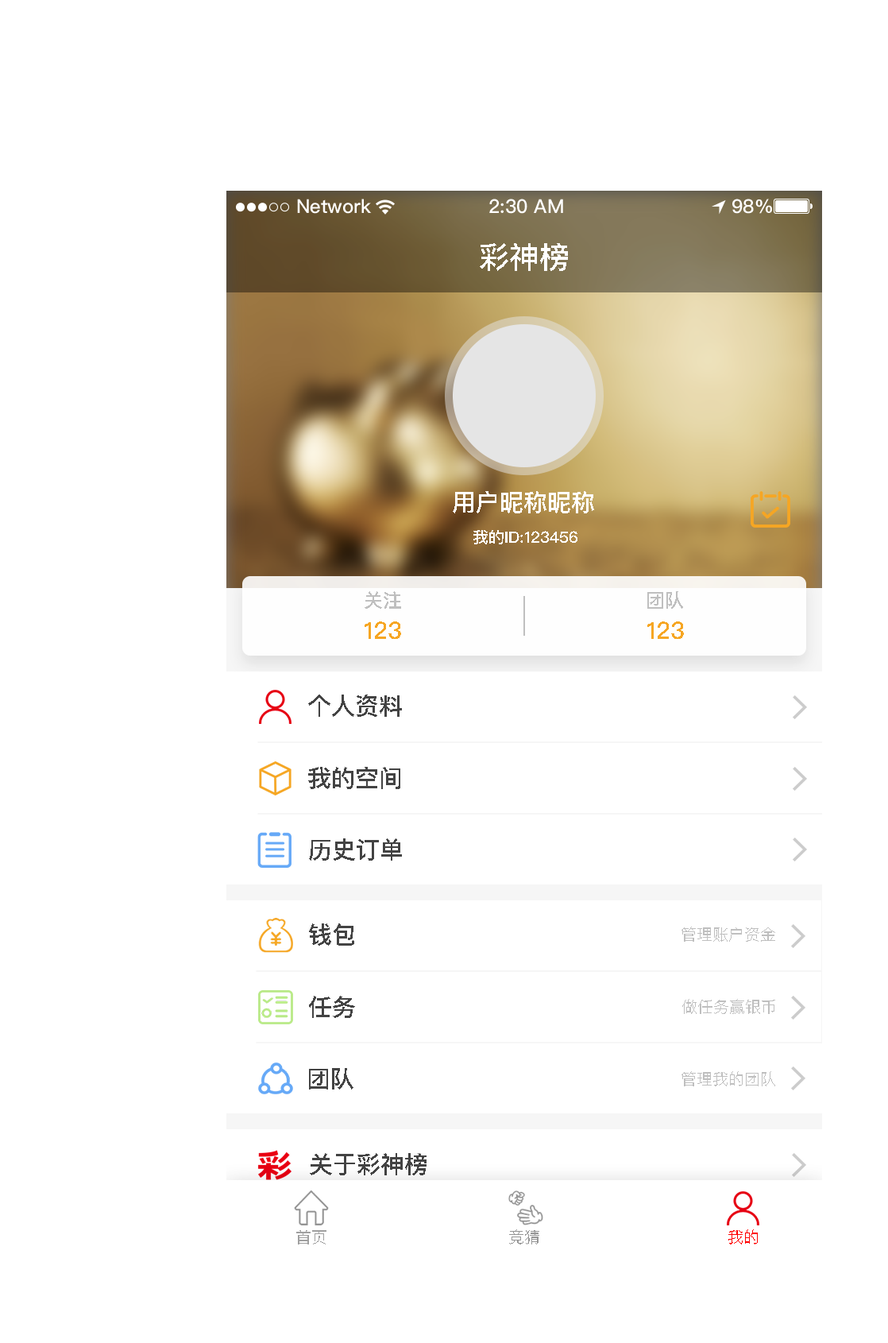
<style>
.page{position:relative;width:888px;height:1343px;background:#ffffff}
.page>*{position:absolute;margin:0}
.t1{font:30.2px "PingFangSC-Medium";color:#ffffff;text-transform:uppercase}
.t2{font:23.8px "PingFangSC-Medium";color:#ffffff;text-transform:uppercase}
.t3{font:15.9px "PingFangSC-Medium";color:#ffffff;text-transform:uppercase}
.t4{font:19.1px "PingFangSC-Medium";color:#bfbfbf;text-transform:uppercase}
.t5{font:23.8px "PingFangSC-Medium";color:#f6a623;text-transform:uppercase}
.t6{font:23.8px "PingFangSC-Medium";color:#434343;text-transform:uppercase}
.t7{font:15.9px "PingFangSC-Regular";color:#bfbfbf;text-transform:uppercase}
.t8{font:15.9px "PingFangSC-Regular";color:#a0a0a0;text-transform:uppercase}
.t9{font:15.9px "PingFangSC-Regular";color:#959595;text-transform:uppercase}
.t10{font:15.9px "PingFangSC-Regular";color:#ff0000;text-transform:uppercase}
</style>
<div class="page">
<p class="t1" style="left:480px;top:243px;width:88px;height:28px">彩神榜</p>
<p class="t2" style="left:453px;top:491px;width:141px;height:22px">用户昵称昵称</p>
<p class="t3" style="left:473px;top:530px;width:105px;height:14px">我的id:123456</p>
<p class="t4" style="left:365px;top:591px;width:36px;height:18px">关注</p>
<p class="t4" style="left:647px;top:591px;width:36px;height:18px">团队</p>
<p class="t5" style="left:365px;top:621px;width:36px;height:18px">123</p>
<p class="t5" style="left:647px;top:621px;width:37px;height:18px">123</p>
<p class="t6" style="left:308px;top:694px;width:94px;height:23px">个人资料</p>
<p class="t6" style="left:308px;top:767px;width:92px;height:22px">我的空间</p>
<p class="t6" style="left:309px;top:838px;width:93px;height:22px">历史订单</p>
<p class="t6" style="left:309px;top:923px;width:45px;height:22px">钱包</p>
<p class="t7" style="left:682px;top:926px;width:93px;height:15px">管理账户资金</p>
<p class="t6" style="left:309px;top:995px;width:46px;height:23px">任务</p>
<p class="t7" style="left:682px;top:999px;width:93px;height:15px">做任务赢银币</p>
<p class="t6" style="left:309px;top:1068px;width:45px;height:21px">团队</p>
<p class="t7" style="left:682px;top:1071px;width:93px;height:15px">管理我的团队</p>
<p class="t6" style="left:310px;top:1153px;width:117px;height:22px">关于彩神榜</p>
<p class="t8" style="left:296px;top:1230px;width:30px;height:14px">首页</p>
<p class="t8" style="left:296px;top:1230px;width:31px;height:14px">首页</p>
<p class="t9" style="left:508px;top:1229px;width:31px;height:15px">竞猜</p>
<p class="t9" style="left:509px;top:1229px;width:30px;height:15px">竞猜</p>
<p class="t10" style="left:728px;top:1229px;width:30px;height:15px">我的</p>
</div>
